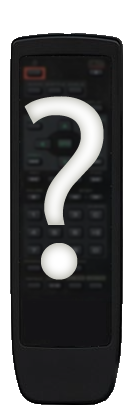
<style>
.page{position:relative;width:131px;height:414px;background:#ffffff}
.page>*{position:absolute;margin:0}
.t1{font:248px "TrebuchetMS";color:#ebebe8}
</style>
<div class="page">
<p class="t1" style="left:24px;top:96px;width:80px;height:184px">?</p>
</div>
